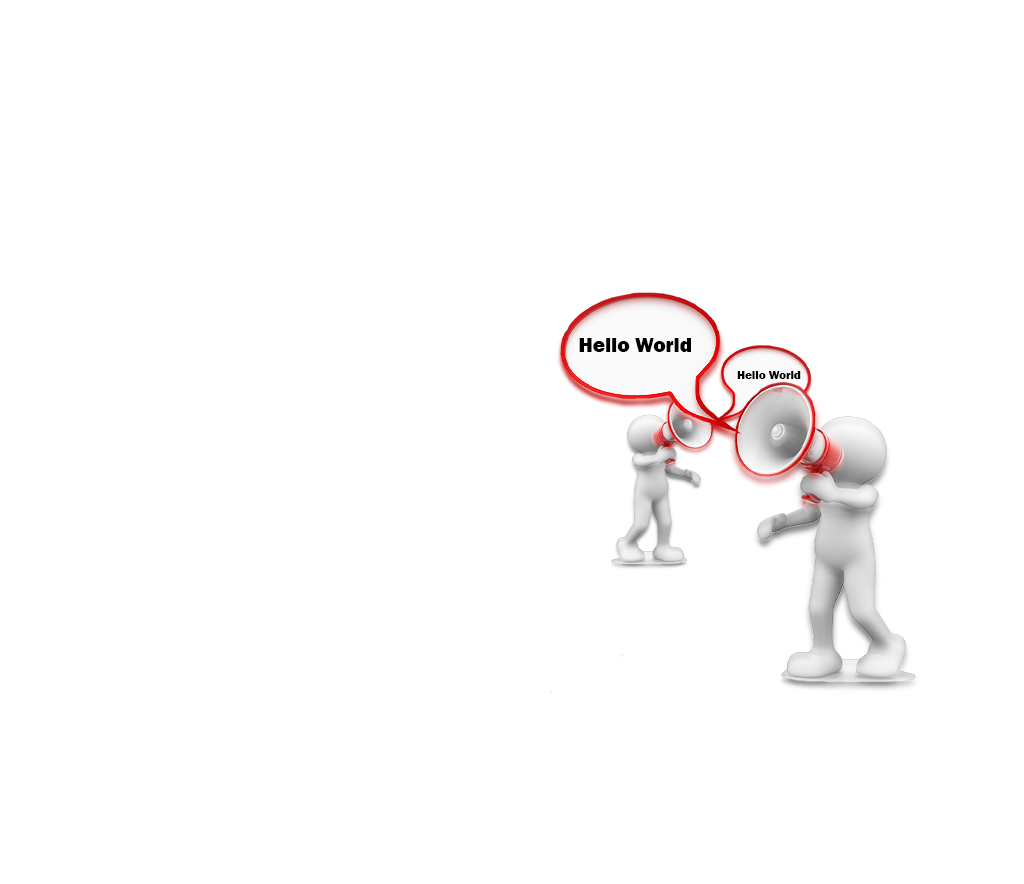
<style>
.page{position:relative;width:1024px;height:884px;background:#ffffff}
.page>*{position:absolute;margin:0}
.t1{font:20.9px "FranklinGothic-Heavy";color:#000000}
.t2{font:11.8px "FranklinGothic-Heavy";color:#000000}
</style>
<div class="page">
<p class="t1" style="left:579px;top:338px;width:112px;height:14px">Hello World</p>
<p class="t2" style="left:737px;top:371px;width:64px;height:8px">Hello World</p>
</div>
